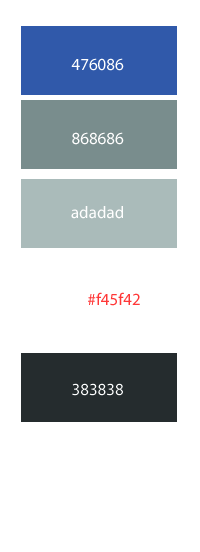
<style>
.page{position:relative;width:200px;height:552px;background:#ffffff}
.page>*{position:absolute;margin:0}
.t1{font:17px "MyriadPro-Regular";color:#ffffff}
.t2{font:17px "MyriadPro-Regular";color:#ff3838}
</style>
<div class="page">
<p class="t1" style="left:71px;top:58px;width:53px;height:13px">476086</p>
<p class="t1" style="left:72px;top:132px;width:52px;height:13px">868686</p>
<p class="t1" style="left:71px;top:206px;width:52px;height:13px">adadad</p>
<p class="t2" style="left:88px;top:292px;width:52px;height:14px">#f45f42</p>
<p class="t1" style="left:72px;top:383px;width:51px;height:13px">383838</p>
</div>
